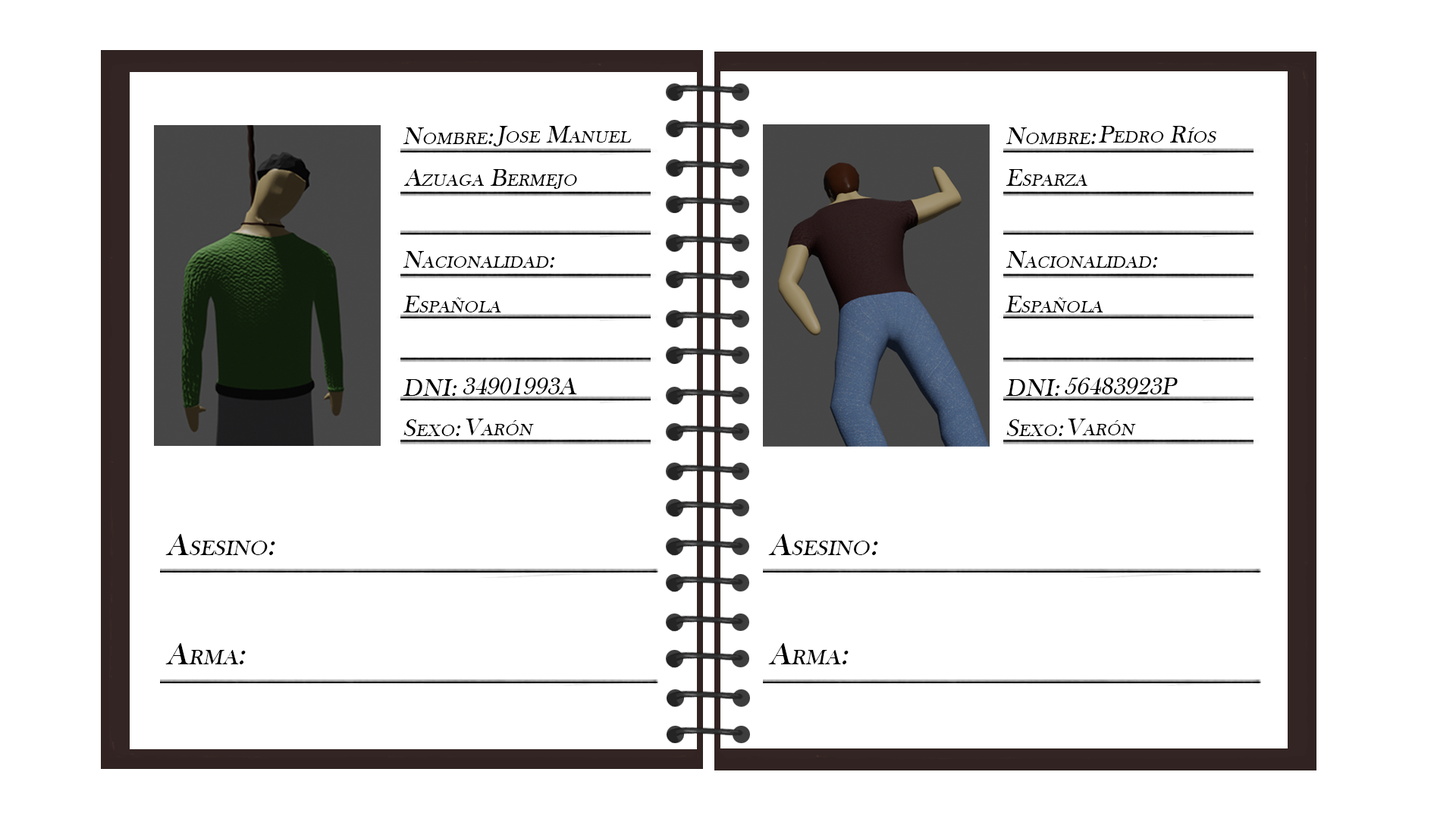
<style>
.page{position:relative;width:1456px;height:819px;background:#ffffff}
.page>*{position:absolute;margin:0}
.t1{font:25.3px "BaskOldFace";color:#000000;font-variant:small-caps;font-style:italic}
.t2{font:31.6px "BaskOldFace";color:#000000;font-variant:small-caps;font-style:italic}
</style>
<div class="page">
<p class="t1" style="left:493px;top:126px;width:139px;height:20px">Jose Manuel</p>
<p class="t1" style="left:1098px;top:126px;width:118px;height:17px">Pedro Ríos</p>
<p class="t1" style="left:403px;top:127px;width:91px;height:17px">Nombre:</p>
<p class="t1" style="left:1006px;top:127px;width:91px;height:17px">Nombre:</p>
<p class="t1" style="left:403px;top:169px;width:174px;height:20px">Azuaga Bermejo</p>
<p class="t1" style="left:1006px;top:169px;width:81px;height:17px">Esparza</p>
<p class="t1" style="left:403px;top:251px;width:152px;height:17px">Nacionalidad:</p>
<p class="t1" style="left:1006px;top:251px;width:152px;height:17px">Nacionalidad:</p>
<p class="t1" style="left:403px;top:296px;width:98px;height:16px">Española</p>
<p class="t1" style="left:1005px;top:296px;width:98px;height:16px">Española</p>
<p class="t1" style="left:463px;top:378px;width:114px;height:16px">34901993A</p>
<p class="t1" style="left:1065px;top:378px;width:113px;height:16px">56483923P</p>
<p class="t1" style="left:403px;top:379px;width:54px;height:17px">DNI:</p>
<p class="t1" style="left:1006px;top:379px;width:54px;height:17px">DNI:</p>
<p class="t1" style="left:403px;top:419px;width:58px;height:17px">Sexo:</p>
<p class="t1" style="left:466px;top:419px;width:68px;height:16px">Varón</p>
<p class="t1" style="left:1006px;top:419px;width:58px;height:17px">Sexo:</p>
<p class="t1" style="left:1068px;top:419px;width:68px;height:16px">Varón</p>
<p class="t2" style="left:165px;top:534px;width:110px;height:21px">Asesino:</p>
<p class="t2" style="left:768px;top:534px;width:110px;height:21px">Asesino:</p>
<p class="t2" style="left:165px;top:643px;width:81px;height:21px">Arma:</p>
<p class="t2" style="left:768px;top:643px;width:81px;height:21px">Arma:</p>
</div>
